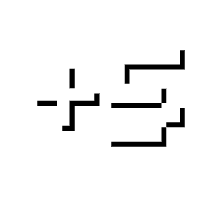
<style>
.page{position:relative;width:200px;height:200px;background:#ffffff}
.page>*{position:absolute;margin:0}
.t1{font:162px "Silkscreen";color:#ffffff;scale:0.95 1}
.t2{font:162px "Silkscreen";scale:0.95 1}
.t3{font:104.6px "Silkscreen"}
</style>
<div class="page">
<p class="t1" style="left:106px;top:45px;width:74px;height:97px">5</p>
<p class="t2" style="left:111px;top:50px;width:74px;height:97px">5</p>
<p class="t3" style="left:37px;top:68px;width:63px;height:63px">+</p>
</div>
